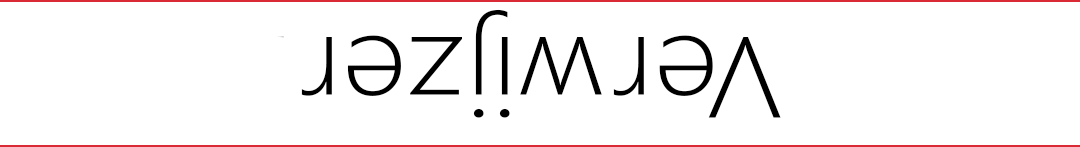
<style>
.page{position:relative;width:1080px;height:147px;background:#ffffff}
.page>*{position:absolute;margin:0}
.t1{font:115px "SegoeUI-Light";color:#000000;scale:1.11 1}
</style>
<div class="page">
<p class="t1" style="left:301px;top:9px;width:480px;height:109px;rotate:180deg">Verwijzer</p>
</div>
